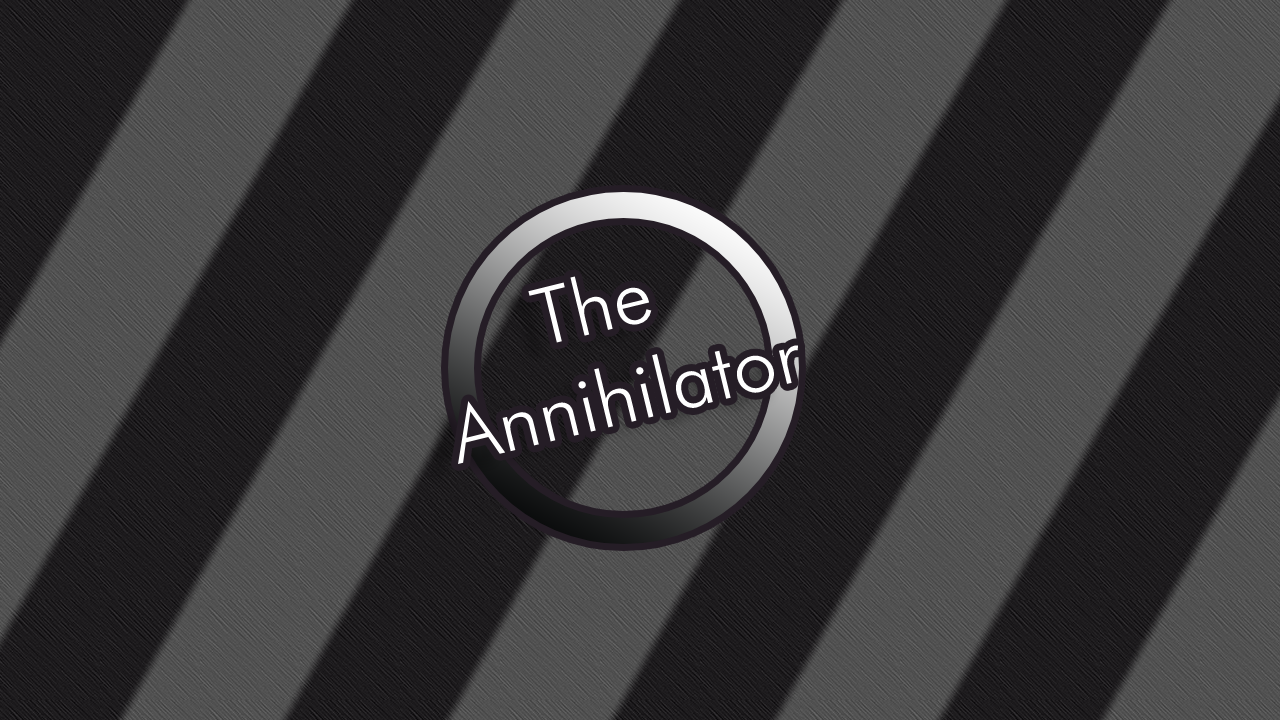
<style>
.page{position:relative;width:1280px;height:720px}
.page>*{position:absolute;margin:0}
.t1{font:79px "FuturaBT-Light";color:#ffffff}
</style>
<div class="page">
<p class="t1" style="left:458px;top:276px;width:340px;height:188px;text-align:center;rotate:-14deg">The <br>Annihilator</p>
</div>
